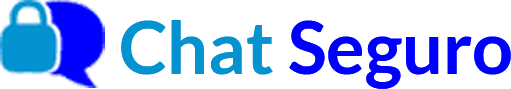
<style>
.page{position:relative;width:511px;height:89px;background:#ffffff}
.page>*{position:absolute;margin:0}
.t1{font:72px "Lato-Bold";color:#0000ff}
.t2{font:72px "Lato-Bold";color:#0592d0}
</style>
<div class="page">
<p class="t1" style="left:121px;top:20px;width:390px;height:69px"><span class="t2">Chat </span>Seguro</p>
</div>
